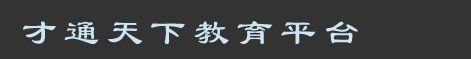
<style>
.page{position:relative;width:471px;height:59px;background:#333333}
.page>*{position:absolute;margin:0}
.t1{font:36px "LiSu";letter-spacing:0.2em;color:#cbe5f3}
</style>
<div class="page">
<p class="t1" style="left:23px;top:21px;width:335px;height:23px">才通天下教育平台</p>
</div>
